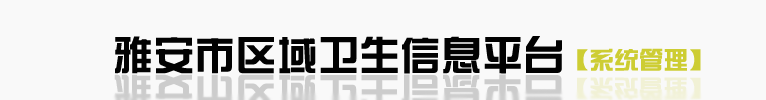
<style>
.page{position:relative;width:766px;height:100px;background:#f9f9f9}
.page>*{position:absolute;margin:0}
.t1{font:40px "HYk1gj";color:#010101;font-weight:bold}
.t2{font:24px "HYk1gj";color:#cdcd33;font-weight:bold}
</style>
<div class="page">
<p class="t1" style="left:115px;top:36px;width:586px;height:38px">雅安市区域卫生信息平台<span class="t2">【系统管理】</span></p>
</div>
